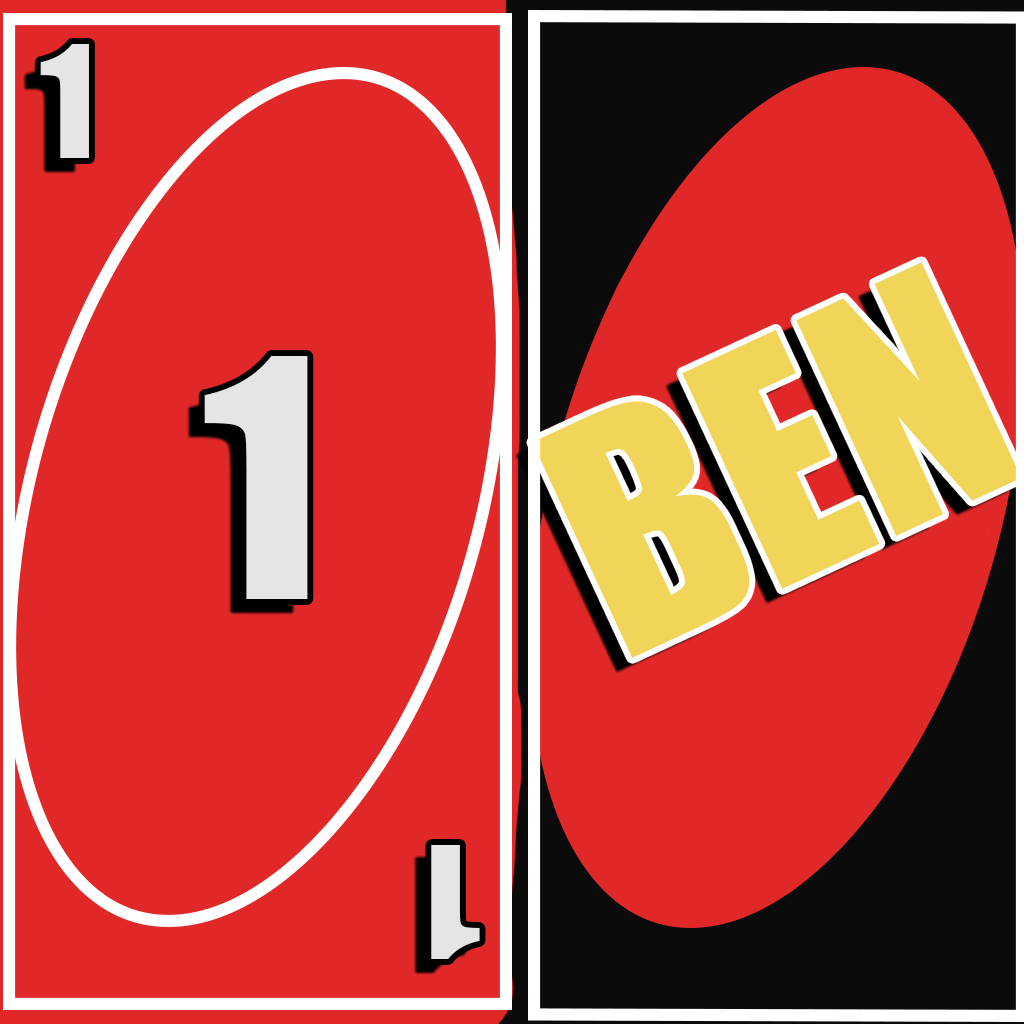
<style>
.page{position:relative;width:1024px;height:1024px;background:#e12828}
.page>*{position:absolute;margin:0}
.t1{font:144.1px "Impact";color:#e5e5e5}
.t2{font:300.6px "Impact";color:#f0d559}
.t3{font:306.7px "Impact";color:#e5e5e5}
</style>
<div class="page">
<p class="t1" style="left:40px;top:44px;width:49px;height:114px">1</p>
<p class="t2" style="left:532px;top:262px;width:490px;height:396px;rotate:-25deg">BEN</p>
<p class="t3" style="left:204px;top:356px;width:104px;height:243px">1</p>
<p class="t1" style="left:431px;top:845px;width:49px;height:114px;rotate:180deg">1</p>
</div>
